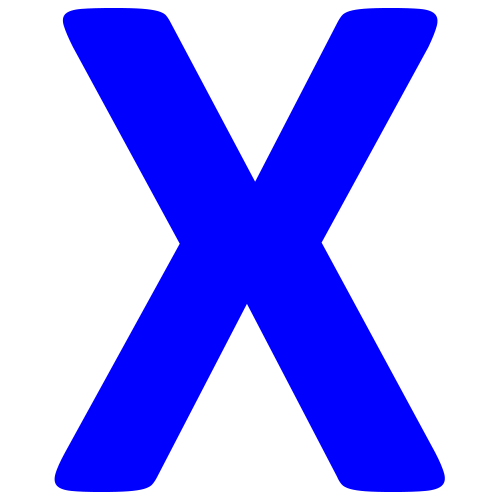
<style>
.page{position:relative;width:500px;height:500px;background:#ffffff}
.page>*{position:absolute;margin:0}
.t1{font:760px "Calibri-Bold";color:#0000ff}
</style>
<div class="page">
<p class="t1" style="left:54px;top:8px;width:391px;height:484px">X</p>
</div>
